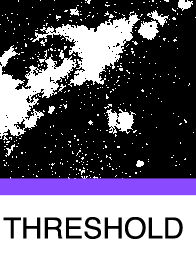
<style>
.page{position:relative;width:196px;height:264px;background:#000000}
.page>*{position:absolute;margin:0}
.t1{font:28.9px "Helvetica";color:#000000}
</style>
<div class="page">
<p class="t1" style="left:3px;top:217px;width:180px;height:22px">THRESHOLD</p>
</div>
